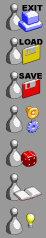
<style>
.page{position:relative;width:46px;height:238px;background:#999999}
.page>*{position:absolute;margin:0}
.t1{font:8px "Arial-Black";color:#000000}
</style>
<div class="page">
<p class="t1" style="left:22px;top:5px;width:21px;height:6px">EXIT</p>
<p class="t1" style="left:19px;top:39px;width:24px;height:6px">LOAD</p>
<p class="t1" style="left:19px;top:73px;width:23px;height:6px">SAVE</p>
</div>
